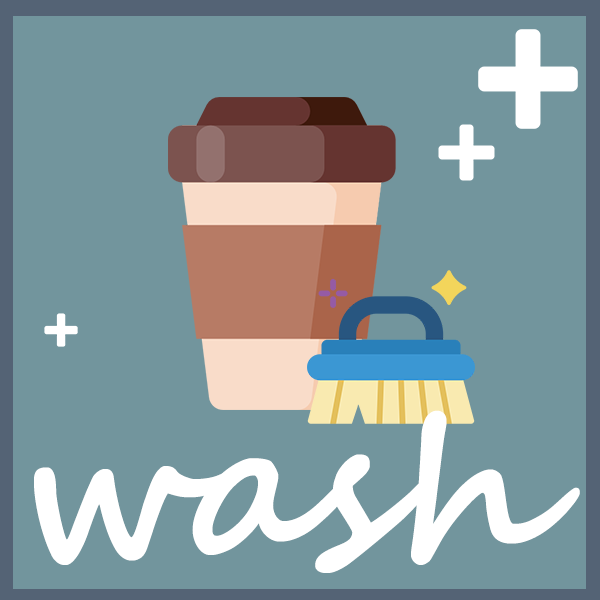
<style>
.page{position:relative;width:600px;height:600px;background:#72959d}
.page>*{position:absolute;margin:0}
.t1{font:194px "SegoeScript-Bold";color:#ffffff}
</style>
<div class="page">
<p class="t1" style="left:34px;top:410px;width:546px;height:163px">wash</p>
</div>
